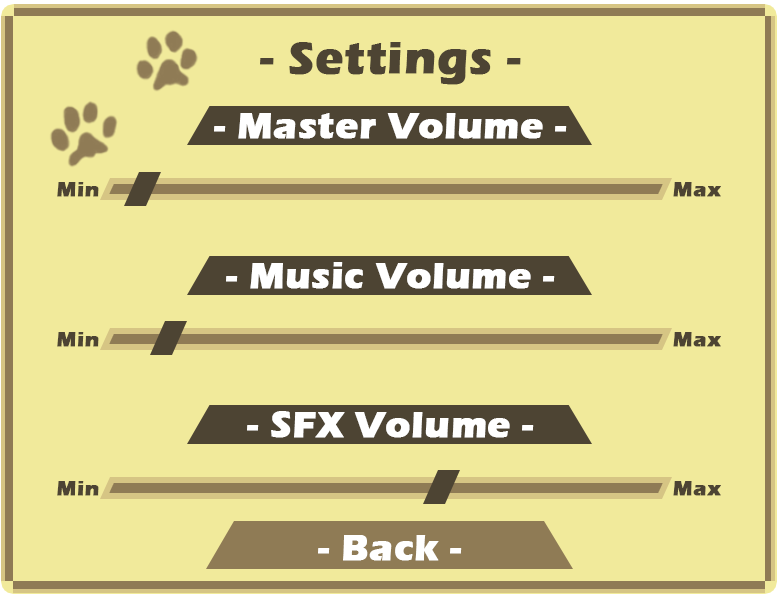
<style>
.page{position:relative;width:778px;height:597px;background:#f1ea9b}
.page>*{position:absolute;margin:0}
.t1{font:45.8px "ErasITC-Bold";letter-spacing:0.017em;color:#4d4433;font-weight:bold}
.t2{font:37.5px "ErasITC-Bold";letter-spacing:0.017em;color:#ffffff;font-weight:bold}
.t3{font:21.3px "ErasITC-Bold";letter-spacing:0.017em;color:#4d4433;font-weight:bold}
</style>
<div class="page">
<p class="t1" style="left:260px;top:42px;width:261px;height:43px">- Settings -</p>
<p class="t2" style="left:214px;top:113px;width:353px;height:26px">- Master Volume -</p>
<p class="t3" style="left:57px;top:182px;width:42px;height:15px">Min</p>
<p class="t3" style="left:673px;top:182px;width:48px;height:15px">Max</p>
<p class="t2" style="left:226px;top:262px;width:329px;height:27px">- Music Volume -</p>
<p class="t3" style="left:57px;top:332px;width:42px;height:15px">Min</p>
<p class="t3" style="left:673px;top:332px;width:48px;height:15px">Max</p>
<p class="t2" style="left:247px;top:411px;width:287px;height:27px">- SFX Volume -</p>
<p class="t3" style="left:57px;top:481px;width:42px;height:15px">Min</p>
<p class="t3" style="left:673px;top:481px;width:48px;height:15px">Max</p>
<p class="t2" style="left:318px;top:535px;width:144px;height:26px">- Back -</p>
</div>
